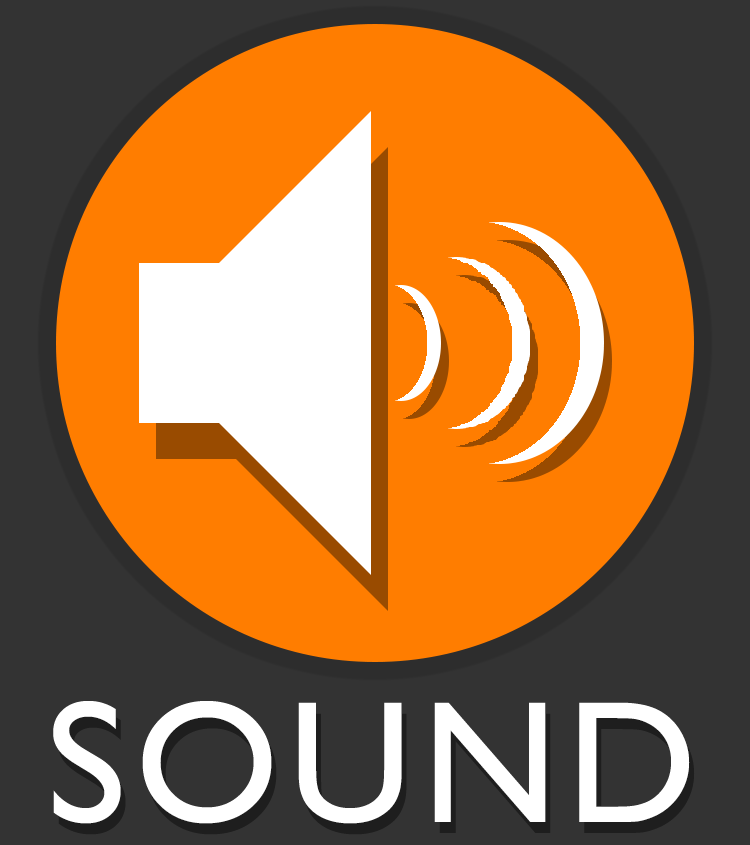
<style>
.page{position:relative;width:750px;height:845px;background:#333333}
.page>*{position:absolute;margin:0}
.t1{font:175px "GillSansMT";letter-spacing:0.05em;color:#ffffff}
</style>
<div class="page">
<p class="t1" style="left:53px;top:701px;width:637px;height:123px">SOUND</p>
</div>
